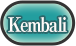
<style>
.page{position:relative;width:76px;height:46px}
.page>*{position:absolute;margin:0}
.t1{font:20px "RyuminPro-ExBold";letter-spacing:-0.08em;color:#fdfbf9;scale:0.85 1}
</style>
<div class="page">
<p class="t1" style="left:8px;top:17px;width:59px;height:15px">Kembali</p>
</div>
